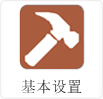
<style>
.page{position:relative;width:103px;height:99px;background:#ffffff}
.page>*{position:absolute;margin:0}
.t1{font:15.3px "SimSun";letter-spacing:0.025em;color:#363535}
</style>
<div class="page">
<p class="t1" style="left:21px;top:79px;width:61px;height:15px">基本设置</p>
</div>
